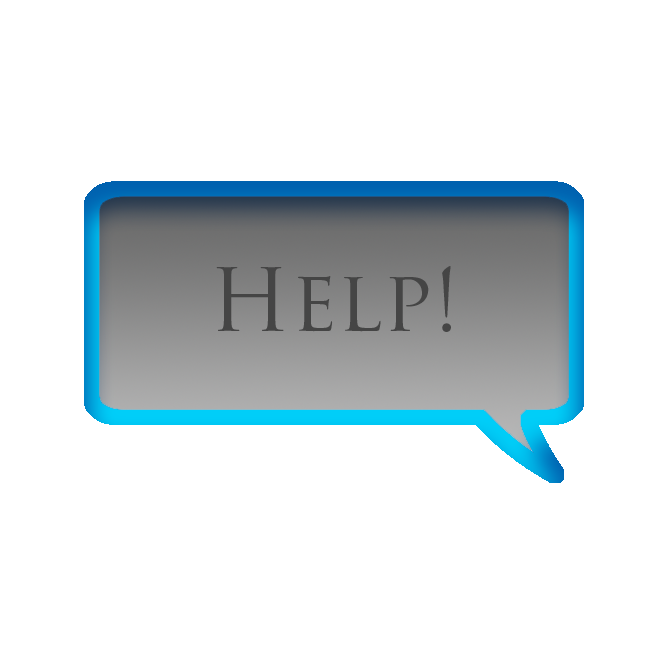
<style>
.page{position:relative;width:650px;height:650px;background:#ffffff}
.page>*{position:absolute;margin:0}
.t1{font:85px "TrajanPro-Regular";color:#454545}
</style>
<div class="page">
<p class="t1" style="left:216px;top:266px;width:235px;height:66px">Help!</p>
</div>
